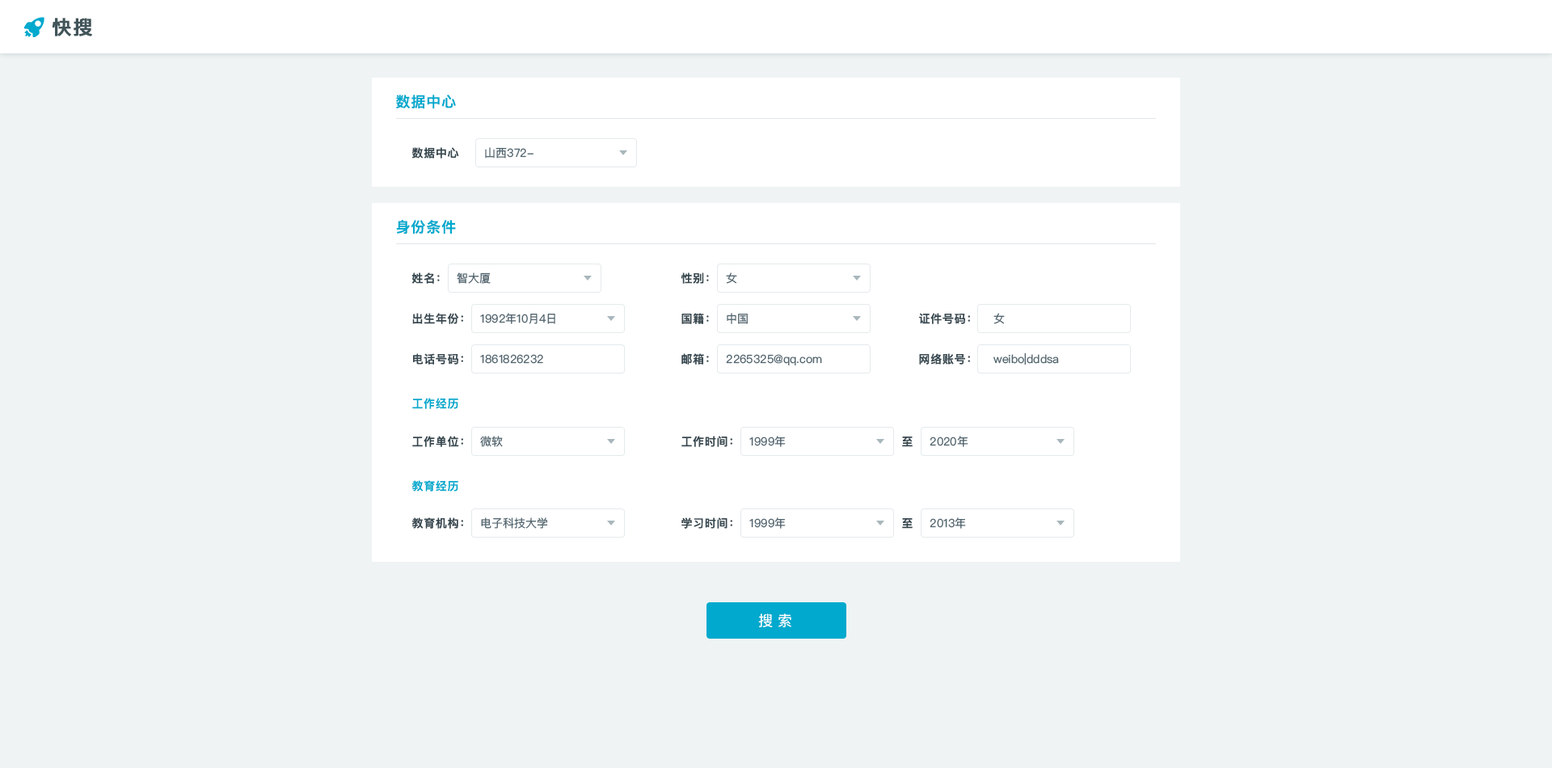
<style>
.page{position:relative;width:1552px;height:768px;background:#eff3f4}
.page>*{position:absolute;margin:0}
.t1{font:19.4px "PingFangSC-Semibold";letter-spacing:0.05em;color:#405459;font-weight:bold}
.t2{font:14.6px "PingFangSC-Semibold";letter-spacing:0.05em;color:#00a9cd}
.t3{font:11.3px "PingFangSC-Semibold";letter-spacing:0.05em;color:#37474f}
.t4{font:11.3px "PingFangSC-Regular";color:#536670}
.t5{font:11.3px "PingFangSC-Semibold";letter-spacing:0.05em;color:#00a9cd}
.t6{font:14.6px "PingFangSC-Regular";color:#ffffff}
</style>
<div class="page">
<p class="t1" style="left:52px;top:18px;width:40px;height:18px">快搜</p>
<p class="t2" style="left:396px;top:95px;width:60px;height:14px">数据中心</p>
<p class="t3" style="left:412px;top:147px;width:47px;height:11px">数据中心</p>
<p class="t4" style="left:485px;top:147px;width:49px;height:11px">山西372-</p>
<p class="t2" style="left:396px;top:220px;width:60px;height:14px">身份条件</p>
<p class="t3" style="left:412px;top:272px;width:28px;height:12px">姓名：</p>
<p class="t4" style="left:457px;top:272px;width:34px;height:12px">智大厦</p>
<p class="t3" style="left:681px;top:272px;width:28px;height:12px">性别：</p>
<p class="t4" style="left:726px;top:272px;width:11px;height:12px">女</p>
<p class="t3" style="left:412px;top:313px;width:51px;height:11px">出生年份：</p>
<p class="t4" style="left:480px;top:313px;width:75px;height:11px">1992年10月4日</p>
<p class="t3" style="left:682px;top:313px;width:27px;height:11px">国籍：</p>
<p class="t4" style="left:727px;top:313px;width:21px;height:11px">中国</p>
<p class="t3" style="left:919px;top:313px;width:51px;height:11px">证件号码：</p>
<p class="t4" style="left:994px;top:313px;width:11px;height:11px">女</p>
<p class="t3" style="left:413px;top:353px;width:50px;height:12px">电话号码：</p>
<p class="t3" style="left:682px;top:353px;width:27px;height:12px">邮箱：</p>
<p class="t3" style="left:919px;top:353px;width:51px;height:12px">网络账号：</p>
<p class="t4" style="left:994px;top:353px;width:65px;height:12px">weibo|dddsa</p>
<p class="t4" style="left:480px;top:354px;width:63px;height:10px">1861826232</p>
<p class="t4" style="left:726px;top:354px;width:96px;height:11px">2265325@qq.com</p>
<p class="t5" style="left:412px;top:398px;width:46px;height:11px">工作经历</p>
<p class="t3" style="left:412px;top:436px;width:51px;height:11px">工作单位：</p>
<p class="t4" style="left:480px;top:436px;width:23px;height:11px">微软</p>
<p class="t3" style="left:682px;top:436px;width:51px;height:11px">工作时间：</p>
<p class="t4" style="left:750px;top:436px;width:36px;height:11px">1999年</p>
<p class="t3" style="left:902px;top:437px;width:11px;height:10px">至</p>
<p class="t4" style="left:930px;top:436px;width:39px;height:11px">2020年</p>
<p class="t5" style="left:412px;top:480px;width:46px;height:12px">教育经历</p>
<p class="t3" style="left:412px;top:517px;width:51px;height:12px">教育机构：</p>
<p class="t4" style="left:481px;top:517px;width:67px;height:12px">电子科技大学</p>
<p class="t3" style="left:682px;top:517px;width:51px;height:12px">学习时间：</p>
<p class="t4" style="left:750px;top:517px;width:36px;height:12px">1999年</p>
<p class="t3" style="left:902px;top:518px;width:11px;height:11px">至</p>
<p class="t4" style="left:930px;top:517px;width:36px;height:12px">2013年</p>
<p class="t6" style="left:758px;top:614px;width:34px;height:13px">搜 索</p>
</div>
